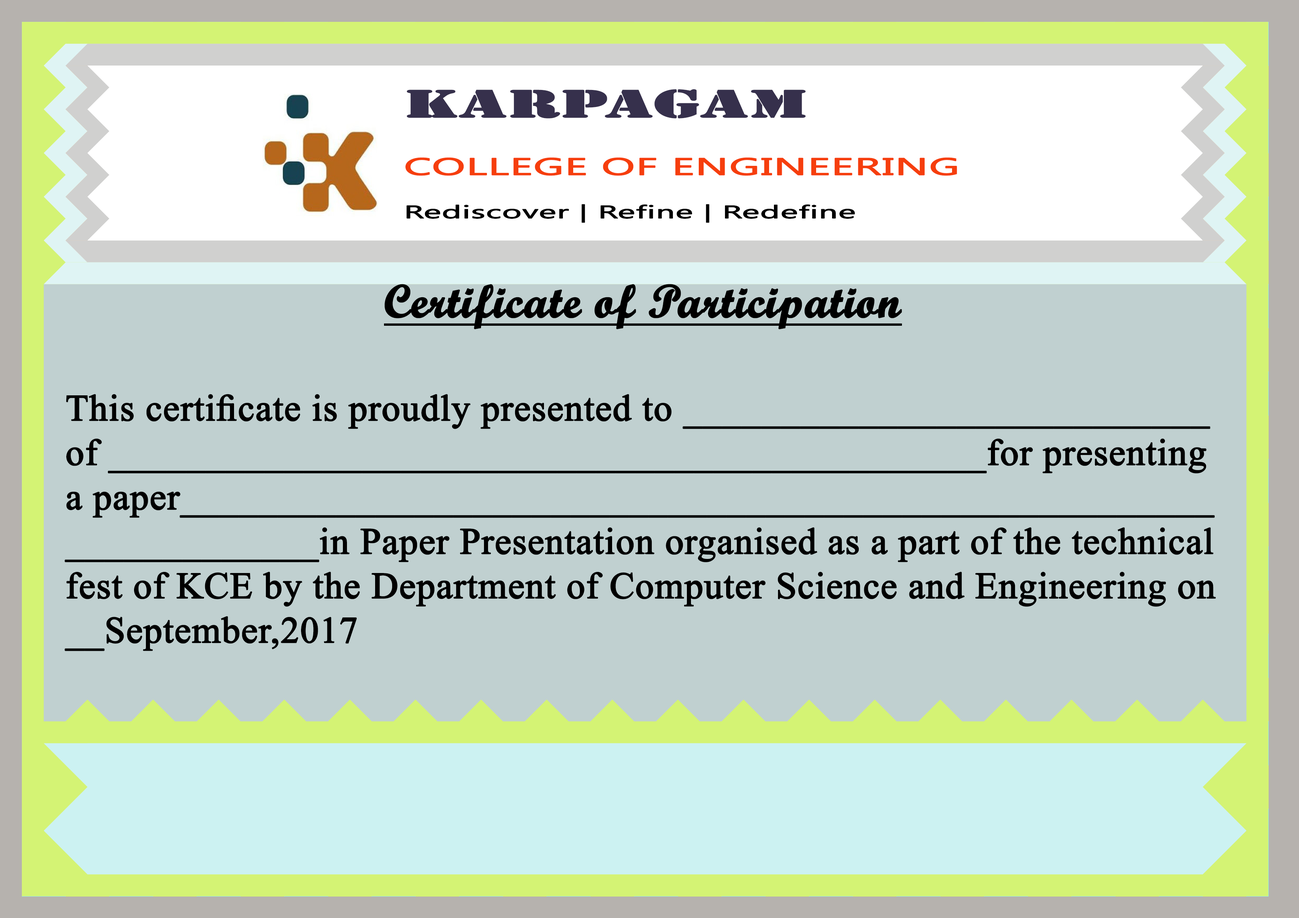
<style>
.page{position:relative;width:1299px;height:918px;background:#c0d0d0}
.page>*{position:absolute;margin:0}
.t1{font:46.3px "ScriptMTBold";color:#000000;font-weight:bold;text-decoration:underline}
.t2{font:37px "TimesNewRomanPSMT";color:#000000;font-weight:bold}
</style>
<div class="page">
<p class="t1" style="left:384px;top:284px;width:518px;height:45px">Certificate of Participation</p>
<p class="t2" style="left:64px;top:394px;width:1152px;height:257px">This certificate is proudly presented to ___________________________<br>of _____________________________________________for presenting a paper_____________________________________________________ _____________in Paper Presentation organised as a part of the technical fest of KCE by the Department of Computer Science and Engineering on __September,2017</p>
</div>
